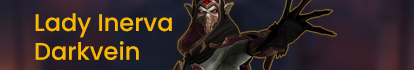
<style>
.page{position:relative;width:414px;height:70px}
.page>*{position:absolute;margin:0}
.t1{font:24px "Poppins-Medium";color:#f8b700}
</style>
<div class="page">
<p class="t1" style="left:35px;top:13px;width:137px;height:47px">Lady Inerva <br>Darkvein</p>
</div>
